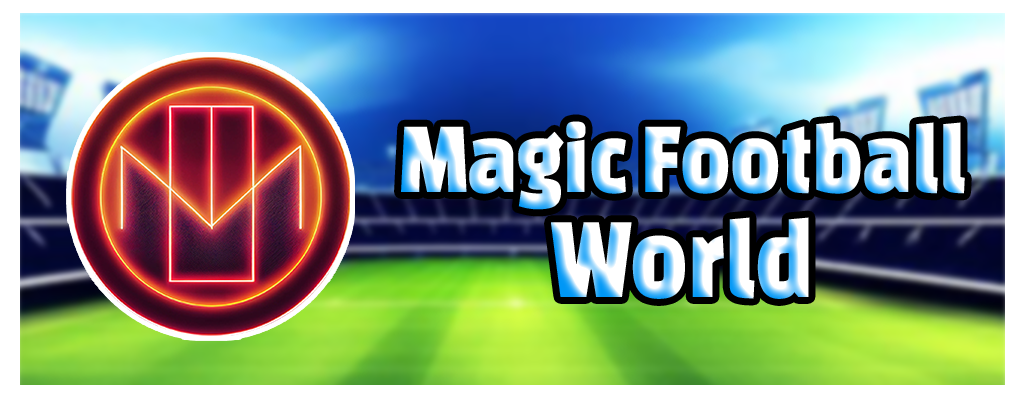
<style>
.page{position:relative;width:1024px;height:401px}
.page>*{position:absolute;margin:0}
.t1{font:104.3px "ChangaOne";scale:0.82 1}
.t2{font:119.2px "ChangaOne";scale:0.82 1}
</style>
<div class="page">
<p class="t1" style="left:401px;top:121px;width:564px;height:89px">Magic Football</p>
<p class="t2" style="left:551px;top:217px;width:258px;height:82px">World</p>
</div>
